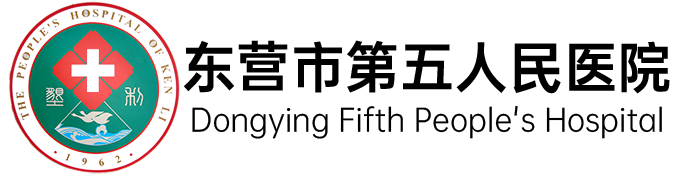
<style>
.page{position:relative;width:688px;height:176px;background:#ffffff}
.page>*{position:absolute;margin:0}
.t1{font:54.4px "OPPOSans-B";color:#000000}
.t2{font:30.6px "OPPOSans-R";color:#000000}
</style>
<div class="page">
<p class="t1" style="left:183px;top:40px;width:487px;height:54px">东营市第五人民医院</p>
<p class="t2" style="left:192px;top:105px;width:470px;height:34px">Dongying Fifth People's Hospital</p>
</div>
